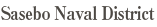
<style>
.page{position:relative;width:157px;height:27px;background:#ffffff}
.page>*{position:absolute;margin:0}
.t1{font:18px "RyuminPro-ExBold";letter-spacing:-0.04em;color:#4c4843;scale:0.9 1}
</style>
<div class="page">
<p class="t1" style="left:1px;top:6px;width:154px;height:15px">Sasebo Naval District</p>
</div>
